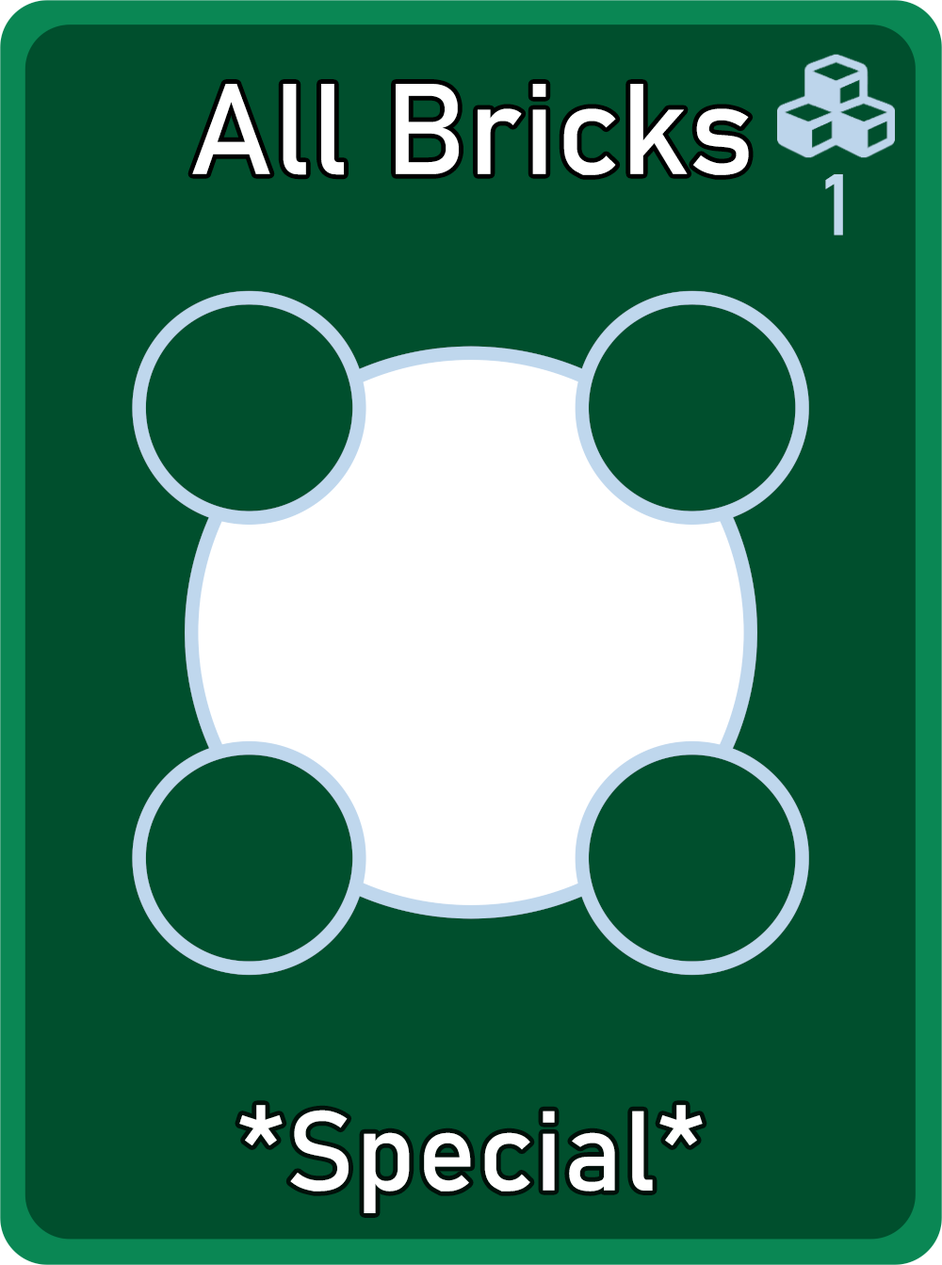
<style>
.page{position:relative;width:942px;height:1265px;background:#004f2d}
.page>*{position:absolute;margin:0}
.t1{font:126.7px "Bahnschrift";letter-spacing:0.01em;color:#ffffff}
.t2{font:85px "Bahnschrift";letter-spacing:0.01em;color:#c1d8ed}
.t3{font:111.3px "Bahnschrift";letter-spacing:0.01em;color:#ffffff}
</style>
<div class="page">
<p class="t1" style="left:192px;top:84px;width:557px;height:91px">All Bricks</p>
<p class="t2" style="left:825px;top:174px;width:18px;height:62px">1</p>
<p class="t3" style="left:239px;top:1105px;width:464px;height:109px">*Special*</p>
</div>
